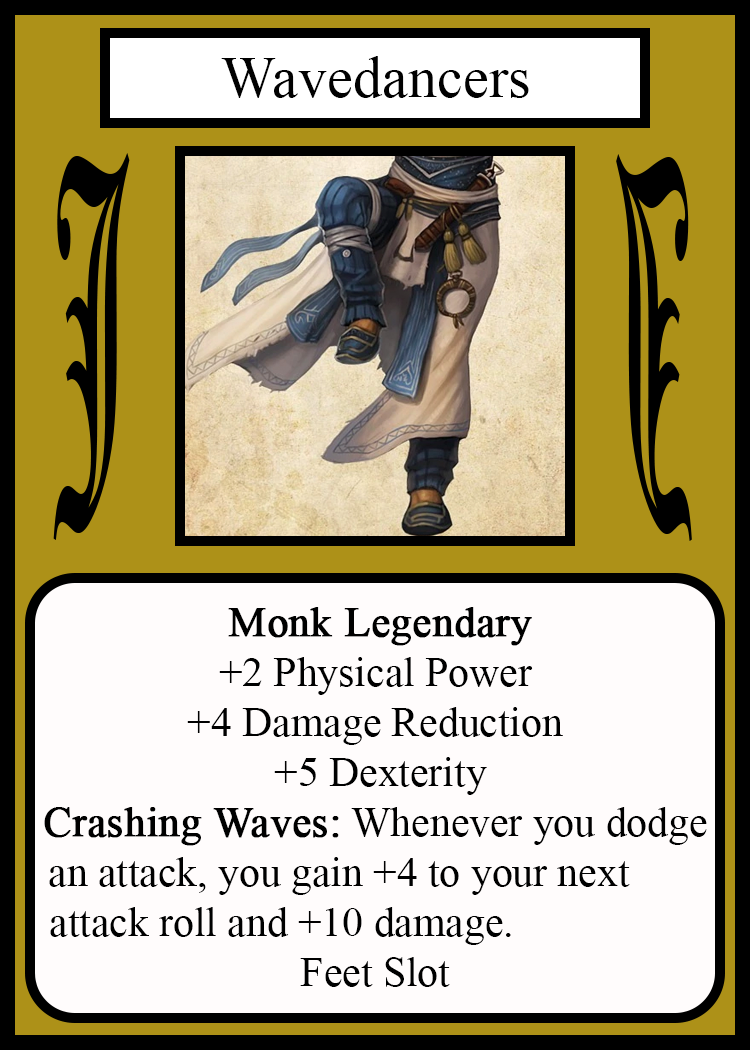
<style>
.page{position:relative;width:750px;height:1050px;background:#fffcfc}
.page>*{position:absolute;margin:0}
.t1{font:58.3px "TimesNewRomanPSMT";color:#010101}
.t2{font:450.1px "OldEnglishTextMT";color:#000000;scale:0.26 1}
.t3{font:449.7px "OldEnglishTextMT";color:#000000;scale:0.26 1}
.t4{font:41.7px "TimesNewRomanPSMT";color:#000000}
.t5{font:41.7px "TimesNewRomanPSMT";color:#000000;font-weight:bold}
</style>
<div class="page">
<p class="t1" style="left:221px;top:56px;width:308px;height:42px">Wavedancers</p>
<p class="t2" style="left:53px;top:153px;width:77px;height:387px">J</p>
<p class="t3" style="left:616px;top:154px;width:76px;height:387px;rotate:180deg">J</p>
<p class="t4" style="left:44px;top:607px;width:663px;height:380px;text-align:center"><span class="t5">Monk Legendary<br></span>+2 Physical Power<br>+4 Damage Reduction<br> +5 Dexterity<br><span class="t5">Crashing Waves:</span> Whenever you dodge<br>an attack, you gain +4 to your next       <br>attack roll and +10 damage.                  <br> Feet Slot</p>
</div>
